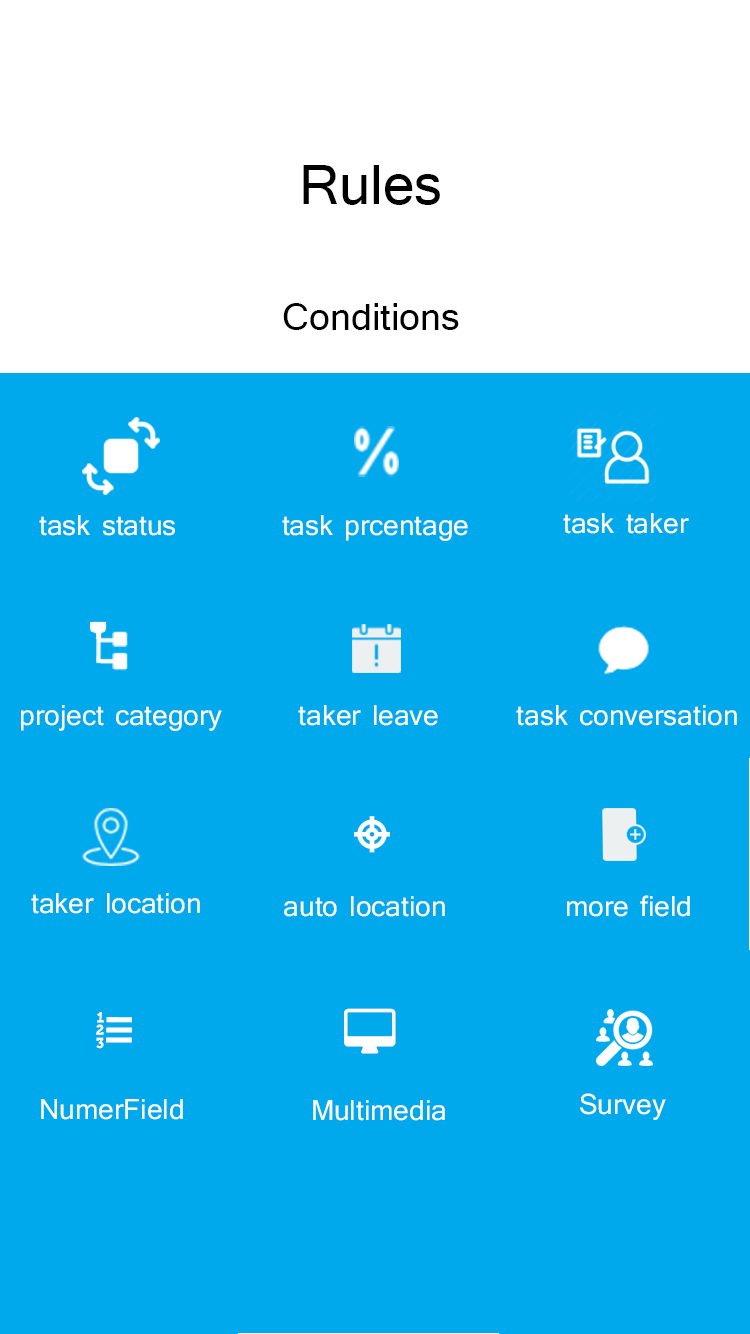
<style>
.page{position:relative;width:750px;height:1334px;background:#00a8ec}
.page>*{position:absolute;margin:0}
.t1{font:72px "Tunga";color:#010101}
.t2{font:48px "Tunga";color:#000000}
.t3{font:36px "Tunga";color:#ffffff}
</style>
<div class="page">
<p class="t1" style="left:303px;top:165px;width:137px;height:40px">Rules</p>
<p class="t2" style="left:283px;top:303px;width:176px;height:27px">Conditions</p>
<p class="t3" style="left:39px;top:515px;width:136px;height:21px">task status</p>
<p class="t3" style="left:282px;top:515px;width:186px;height:26px">task prcentage</p>
<p class="t3" style="left:563px;top:513px;width:126px;height:21px">task taker</p>
<p class="t3" style="left:21px;top:705px;width:201px;height:26px">project category</p>
<p class="t3" style="left:298px;top:705px;width:140px;height:21px">taker leave</p>
<p class="t3" style="left:516px;top:705px;width:221px;height:21px">task conversation</p>
<p class="t3" style="left:31px;top:893px;width:169px;height:21px">taker location</p>
<p class="t3" style="left:284px;top:896px;width:161px;height:21px">auto location</p>
<p class="t3" style="left:567px;top:895px;width:123px;height:22px">more field</p>
<p class="t3" style="left:580px;top:1093px;width:86px;height:27px">Survey</p>
<p class="t3" style="left:41px;top:1099px;width:142px;height:21px">NumerField</p>
<p class="t3" style="left:313px;top:1100px;width:132px;height:21px">Multimedia</p>
</div>
